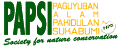
<style>
.page{position:relative;width:120px;height:46px;background:#ffffff}
.page>*{position:absolute;margin:0}
.t1{font:48px "AbadiMT-CondensedExtraBold";color:#015d0c;scale:0.47 1}
.t2{font:9px "Basic-Lightltd";color:#ffb400}
.t3{font:7.9px "Basic-Lightltd";color:#ffb400}
.t4{font:9px "Basic-Lightltd";color:#ffb400;scale:1.22 1}
.t5{font:9px "Basic-Lightltd";color:#ffb400;scale:1.09 1}
.t6{font:9px "BankoliBold";color:#015d0c;scale:1.03 1}
</style>
<div class="page">
<p class="t1" style="left:4px;top:1px;width:48px;height:35px">PAPSI</p>
<p class="t2" style="left:52px;top:2px;width:46px;height:8px">PAGUYUBAN</p>
<p class="t3" style="left:53px;top:11px;width:46px;height:7px">A   L   A   M</p>
<p class="t4" style="left:52px;top:27px;width:48px;height:8px">SUKABUMI</p>
<p class="t5" style="left:53px;top:19px;width:46px;height:7px">PAKIDULAN</p>
<p class="t6" style="left:3px;top:34px;width:115px;height:12px;rotate:-3deg">Society for nature conservation</p>
</div>
